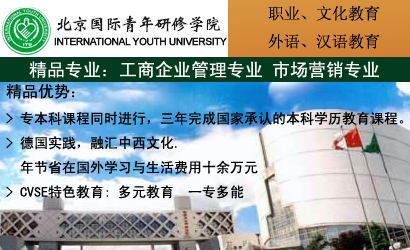
<style>
.page{position:relative;width:410px;height:250px}
.page>*{position:absolute;margin:0}
.t1{font:16px "SimSun";color:#000000}
.t2{font:18px "SimHei";color:#f7f4f4}
.t3{font:14px "SimHei";color:#000000}
.t4{font:16px "SimHei";color:#000000}
</style>
<div class="page">
<p class="t1" style="left:268px;top:5px;width:112px;height:44px;text-align:center">职业、文化教育<br>外语、汉语教育</p>
<p class="t2" style="left:29px;top:61px;width:350px;height:17px">精品专业：工商企业管理专业 市场营销专业</p>
<p class="t3" style="left:6px;top:84px;width:397px;height:115px"><span class="t4">精品优势：<br></span>&gt; 专本科课程同时进行，三年完成国家承认的本科学历教育课程。<br>&gt; 德国实践，融汇中西文化. <br>  年节省在国外学习与生活费用十余万元<br>&gt; CVSE特色教育: 多元教育  一专多能</p>
</div>
